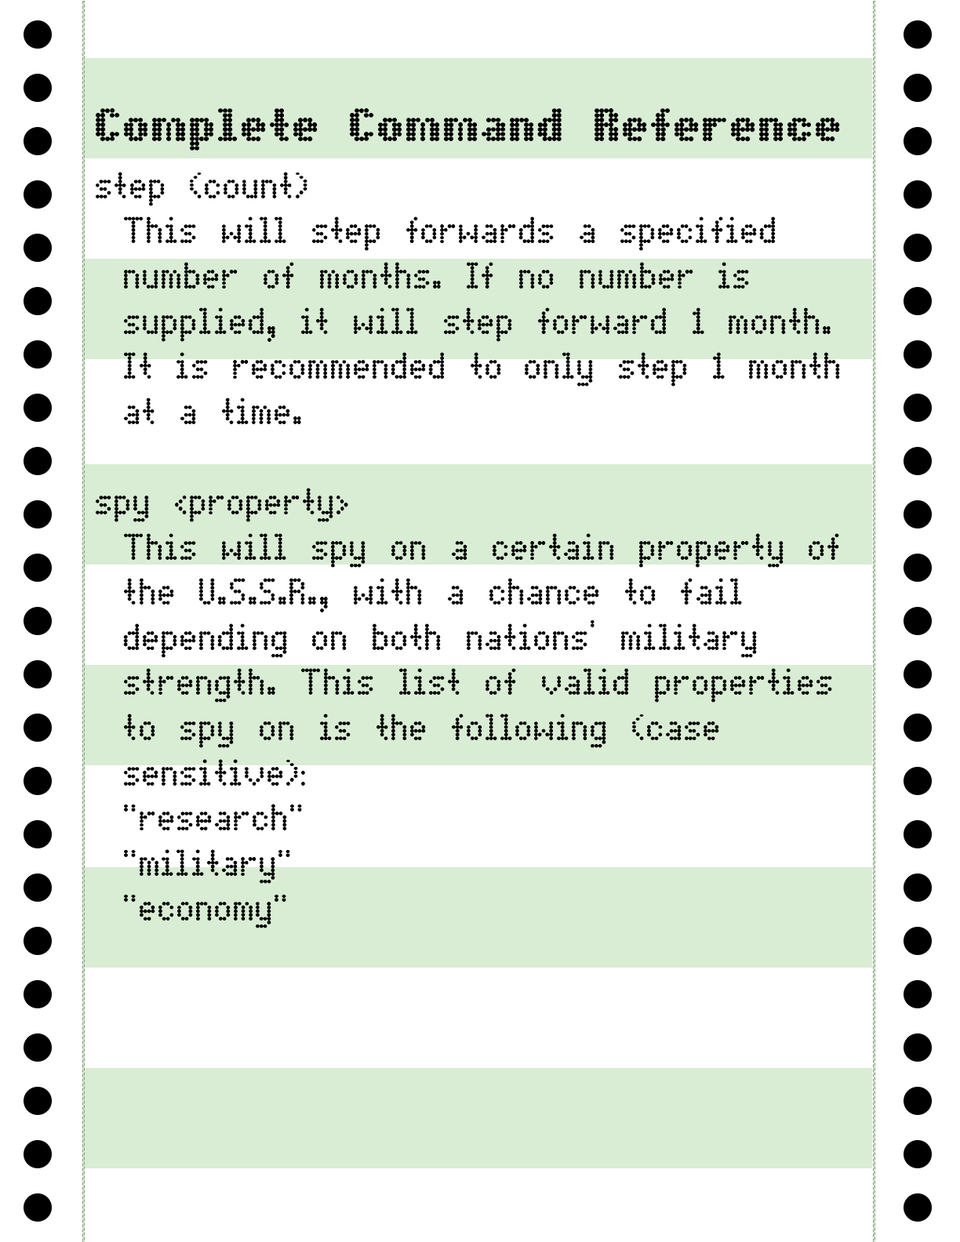
<style>
.page{position:relative;width:960px;height:1242px;background:#ffffff}
.page>*{position:absolute;margin:0}
.t1{font:47.1px "DotMatrixBold";color:#000000}
.t2{font:37.6px "DotMatrix";color:#000000}
</style>
<div class="page">
<p class="t1" style="left:96px;top:108px;width:744px;height:43px">Complete Command Reference</p>
<p class="t2" style="left:96px;top:172px;width:744px;height:757px">step (count)<br> This will step forwards a specified<br> number of months. If no number is<br> supplied, it will step forward 1 month.<br> It is recommended to only step 1 month<br> at a time.<br><br>spy &lt;property&gt;<br> This will spy on a certain property of<br> the U.S.S.R., with a chance to fail<br> depending on both nations' military<br> strength. This list of valid properties<br> to spy on is the following (case<br> sensitive):<br> "research"<br> "military"<br> "economy"</p>
</div>
